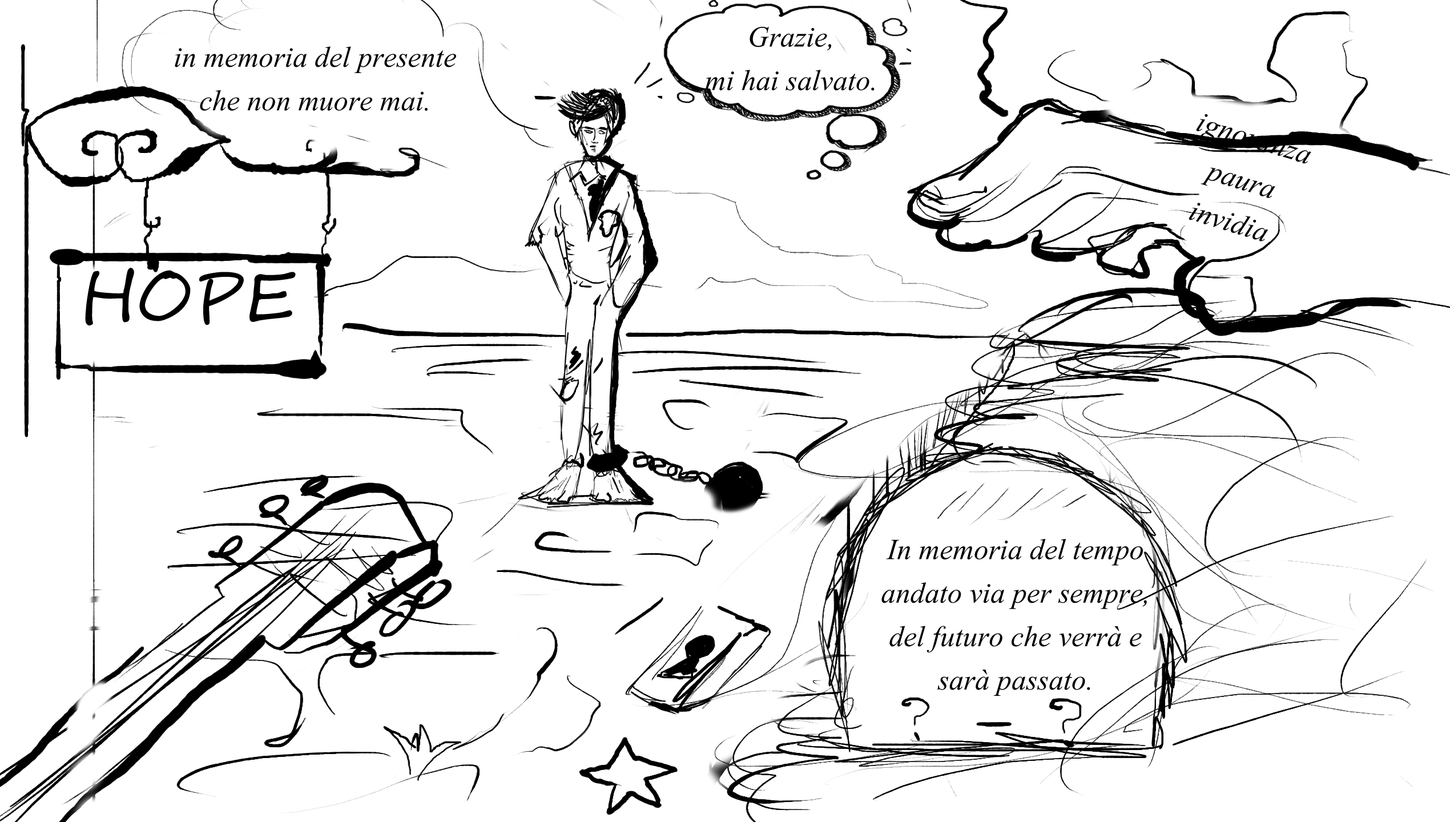
<style>
.page{position:relative;width:1450px;height:822px;background:#ffffff}
.page>*{position:absolute;margin:0}
.t1{font:36.3px "Vijaya";color:#000000}
.t2{font:66.5px "SegoeScript";color:#000000}
</style>
<div class="page">
<p class="t1" style="left:705px;top:27px;width:170px;height:64px;text-align:center">Grazie,<br>mi hai salvato.</p>
<p class="t1" style="left:175px;top:46px;width:281px;height:65px;text-align:center">in memoria del presente<br>che non muore mai.</p>
<p class="t1" style="left:1189px;top:114px;width:123px;height:128px;text-align:center;rotate:17deg">ignoranza<br>paura<br>invidia</p>
<p class="t2" style="left:85px;top:268px;width:211px;height:58px">HOPE</p>
<p class="t1" style="left:882px;top:539px;width:265px;height:157px;text-align:center">In memoria del tempo<br>andato via per sempre,<br>del futuro che verrà e<br>sarà passato.</p>
</div>
